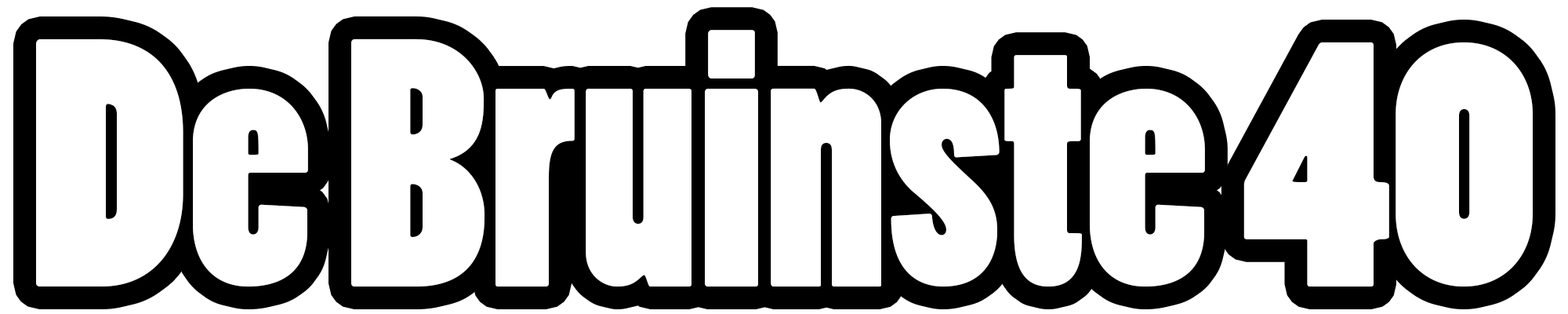
<style>
.page{position:relative;width:1568px;height:314px;background:#ffffff}
.page>*{position:absolute;margin:0}
.t1{font:329.3px "PoplarStd";color:#ffffff}
</style>
<div class="page">
<p class="t1" style="left:36px;top:30px;width:1497px;height:256px">De Bruinste 40</p>
</div>
